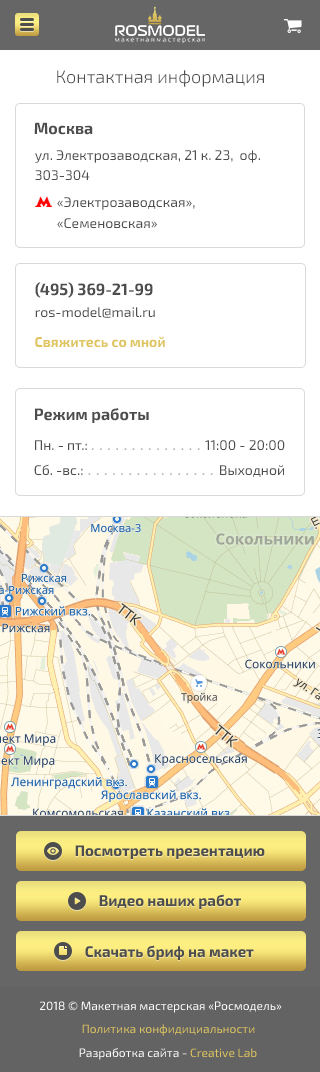
<style>
.page{position:relative;width:320px;height:1072px;background:#ffffff}
.page>*{position:absolute;margin:0}
.t1{font:18px "Exo2-Light";color:#4d4d4d}
.t2{font:16px "Exo2-Bold";color:#4d4d4d}
.t3{font:14px/20px "Exo2-Regular";color:#4d4d4d}
.t4{font:14px "Exo2-Regular";color:#4d4d4d}
.t5{font:14px "Exo2-Bold";color:#dfc560}
.t6{font:12px "Exo2-Bold";color:#b4b4b4}
</style>
<div class="page">
<p class="t1" style="left:57px;top:70px;width:207px;height:17px">Контактная информация</p>
<p class="t2" style="left:34px;top:122px;width:59px;height:13px">Москва</p>
<p class="t3" style="left:35px;top:150px;width:225px;height:31px">ул. Электрозаводская, 21 к. 23,  оф. <br>303-304</p>
<p class="t4" style="left:57px;top:197px;width:138px;height:13px">«Электрозаводская»,</p>
<p class="t4" style="left:57px;top:218px;width:100px;height:11px">«Семеновская»</p>
<p class="t2" style="left:35px;top:282px;width:118px;height:16px">(495) 369-21-99</p>
<p class="t4" style="left:35px;top:307px;width:120px;height:11px">ros-model@mail.ru</p>
<p class="t5" style="left:35px;top:336px;width:130px;height:12px">Свяжитесь со мной</p>
<p class="t2" style="left:35px;top:408px;width:114px;height:15px">Режим работы</p>
<p class="t4" style="left:35px;top:440px;width:52px;height:10px">Пн. - пт.:</p>
<p class="t6" style="left:91px;top:448px;width:109px;height:2px">.  .  .  .  .  .  .  .  .  .  .  .  .  .</p>
<p class="t4" style="left:205px;top:440px;width:80px;height:11px">11:00 - 20:00</p>
<p class="t4" style="left:34px;top:464px;width:49px;height:12px">Сб. -вс.:</p>
<p class="t6" style="left:88px;top:473px;width:125px;height:2px">.  .  .  .  .  .  .  .  .  .  .  .  .  .  .  .</p>
<p class="t4" style="left:220px;top:465px;width:64px;height:12px">Выходной</p>
</div>
